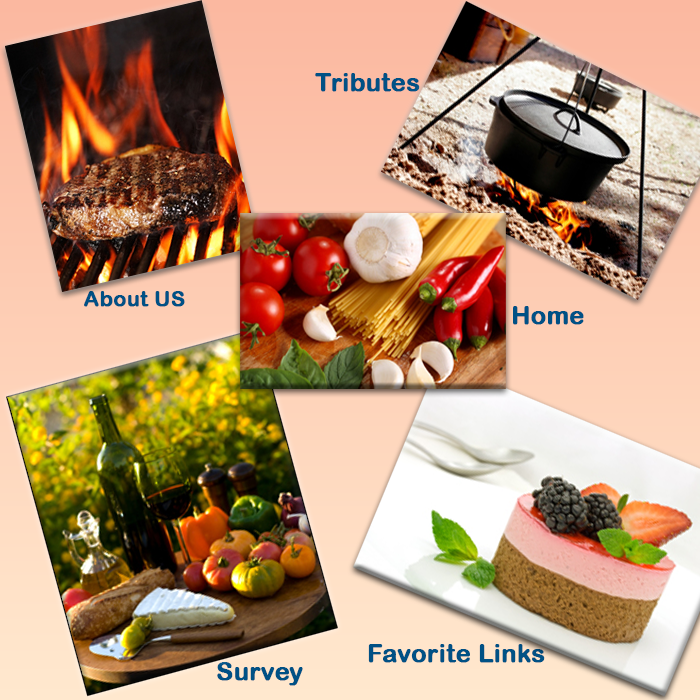
<style>
.page{position:relative;width:700px;height:700px}
.page>*{position:absolute;margin:0}
.t1{font:25px "ArialRoundedMTBold";color:#005185;font-weight:bold}
.t2{font:21.3px "ArialRoundedMTBold";color:#005185;font-weight:bold}
</style>
<div class="page">
<p class="t1" style="left:315px;top:73px;width:105px;height:19px">Tributes</p>
<p class="t2" style="left:84px;top:291px;width:101px;height:16px">About US</p>
<p class="t1" style="left:513px;top:306px;width:71px;height:19px">Home</p>
<p class="t1" style="left:368px;top:644px;width:177px;height:19px">Favorite Links</p>
<p class="t1" style="left:217px;top:662px;width:86px;height:24px">Survey</p>
</div>
